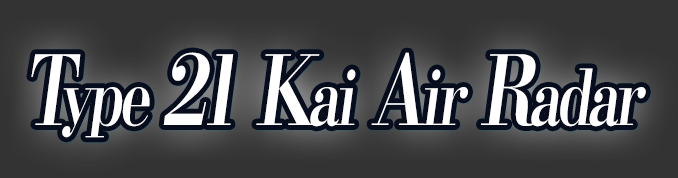
<style>
.page{position:relative;width:678px;height:178px;background:#333333}
.page>*{position:absolute;margin:0}
.t1{font:96px "KochoStd-Heavy";letter-spacing:-0.07em;color:#ffffff;font-style:italic;scale:0.75 1}
.t2{font:76.8px "KochoStd-Heavy";letter-spacing:-0.07em;color:#ffffff;font-style:italic;scale:0.75 1}
</style>
<div class="page">
<p class="t1" style="left:31px;top:52px;width:615px;height:86px">T<span class="t2">ype </span>21 K<span class="t2">ai</span> A<span class="t2">ir</span> R<span class="t2">adar</span></p>
</div>
